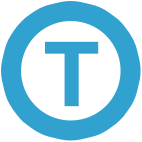
<style>
.page{position:relative;width:142px;height:142px;background:#ffffff}
.page>*{position:absolute;margin:0}
.t1{font:90.6px "HelveticaNeueCyr-Bold";letter-spacing:0.05em;color:#31a2d0}
</style>
<div class="page">
<p class="t1" style="left:45px;top:41px;width:54px;height:66px">T</p>
</div>
